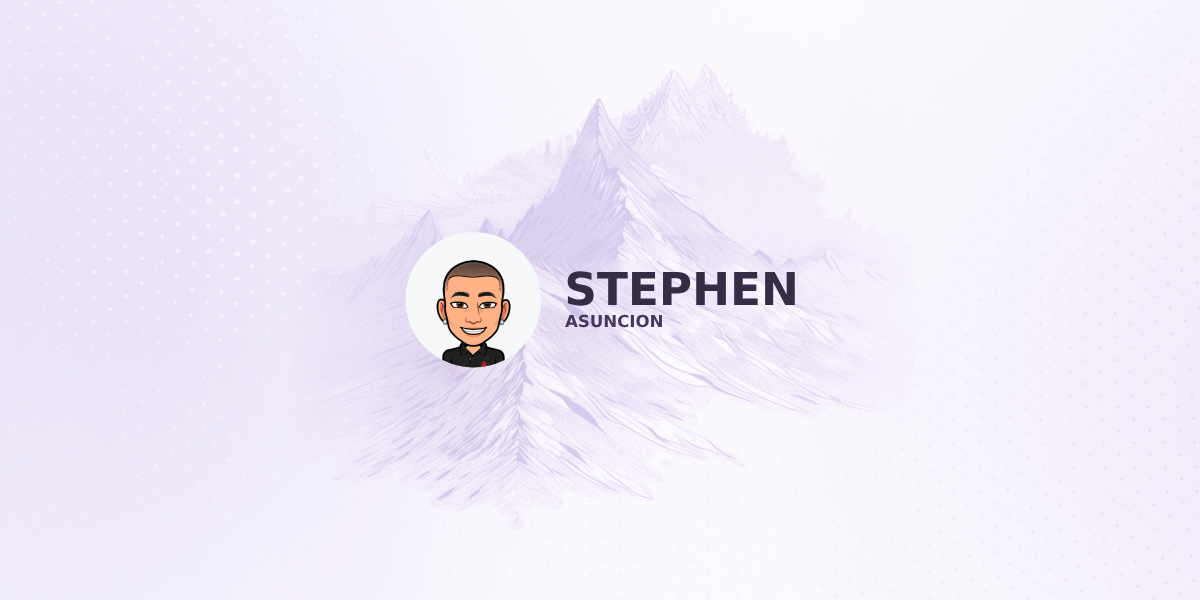
<style>
.page{position:relative;width:1200px;height:600px}
.page>*{position:absolute;margin:0}
.t1{font:45.3px "DejaVuSans-Bold";color:#323231}
.t2{font:16.6px "DejaVuSans-Bold";color:#404040}
</style>
<div class="page">
<p class="t1" style="left:567px;top:271px;width:228px;height:35px">STEPHEN</p>
<p class="t2" style="left:565px;top:314px;width:97px;height:14px">ASUNCION</p>
</div>
